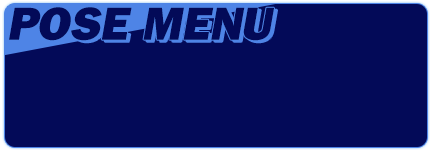
<style>
.page{position:relative;width:432px;height:150px;background:#030a58}
.page>*{position:absolute;margin:0}
.t1{font:48px "FranklinGothic-Heavy";letter-spacing:0.05em;color:#030a58;font-style:italic}
</style>
<div class="page">
<p class="t1" style="left:9px;top:7px;width:265px;height:34px">POSE MENU</p>
</div>
